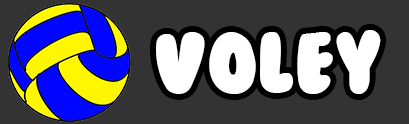
<style>
.page{position:relative;width:409px;height:124px;background:#333333}
.page>*{position:absolute;margin:0}
.t1{font:80px "BubbleGum";color:#ffffff}
</style>
<div class="page">
<p class="t1" style="left:156px;top:30px;width:225px;height:64px">Voley</p>
</div>
